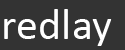
<style>
.page{position:relative;width:125px;height:50px;background:#333333}
.page>*{position:absolute;margin:0}
.t1{font:44.4px "Calibri";color:#ffffff}
</style>
<div class="page">
<p class="t1" style="left:4px;top:9px;width:108px;height:37px">redlay</p>
</div>
